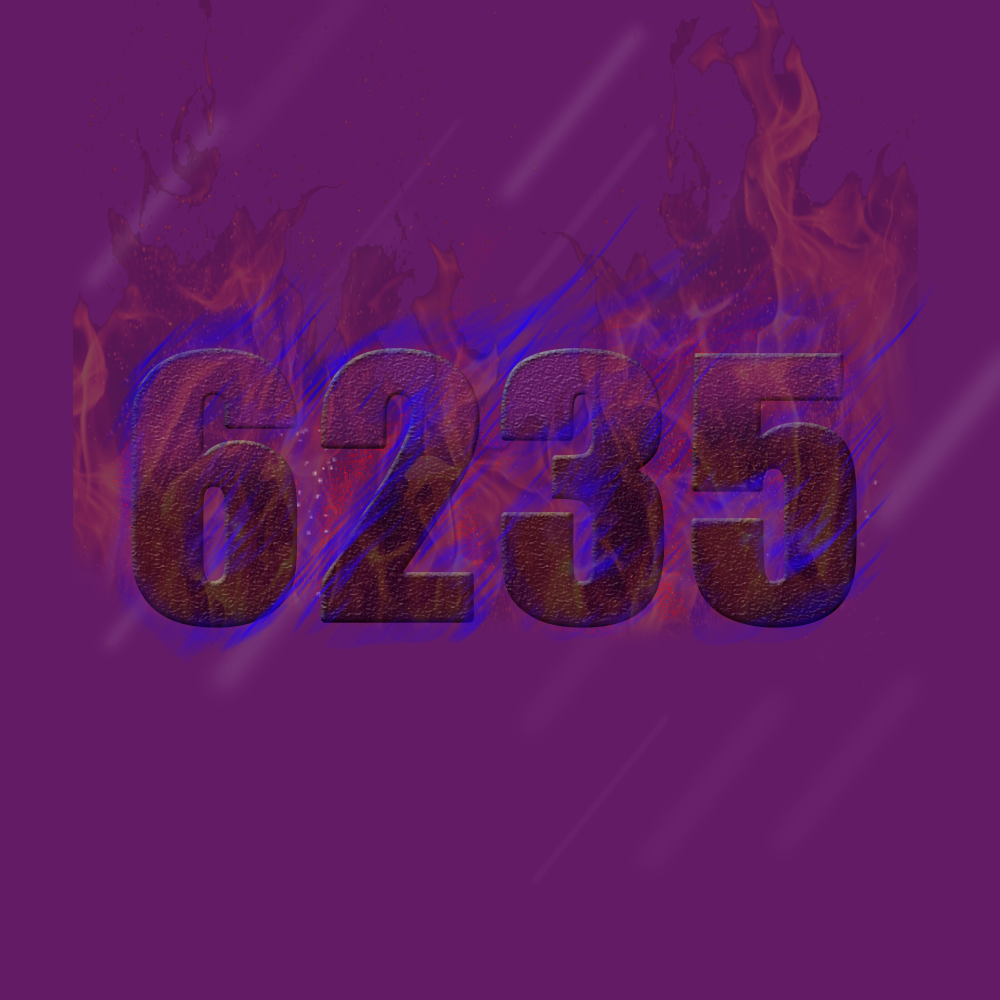
<style>
.page{position:relative;width:1000px;height:1000px;background:#641b66}
.page>*{position:absolute;margin:0}
.t1{font:333.8px "Impact";text-transform:uppercase;font-weight:bold}
</style>
<div class="page">
<p class="t1" style="left:131px;top:348px;width:726px;height:280px">6235</p>
</div>
